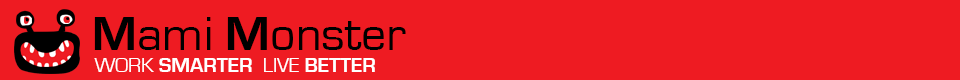
<style>
.page{position:relative;width:960px;height:80px;background:#ee1b22}
.page>*{position:absolute;margin:0}
.t1{font:50px "EurostileRegular";color:#000000}
.t2{font:50px "EurostileBold";color:#000000}
.t3{font:20.8px "EurostileBold";color:#ffffff}
.t4{font:20.8px "EurostileRegular";color:#ffffff}
</style>
<div class="page">
<p class="t1" style="left:94px;top:17px;width:312px;height:33px"><span class="t2">M</span>ami <span class="t2">M</span>onster</p>
<p class="t3" style="left:94px;top:58px;width:281px;height:14px"><span class="t4">WORK </span>SMARTER<span class="t4">  LIVE </span>BETTER</p>
</div>
